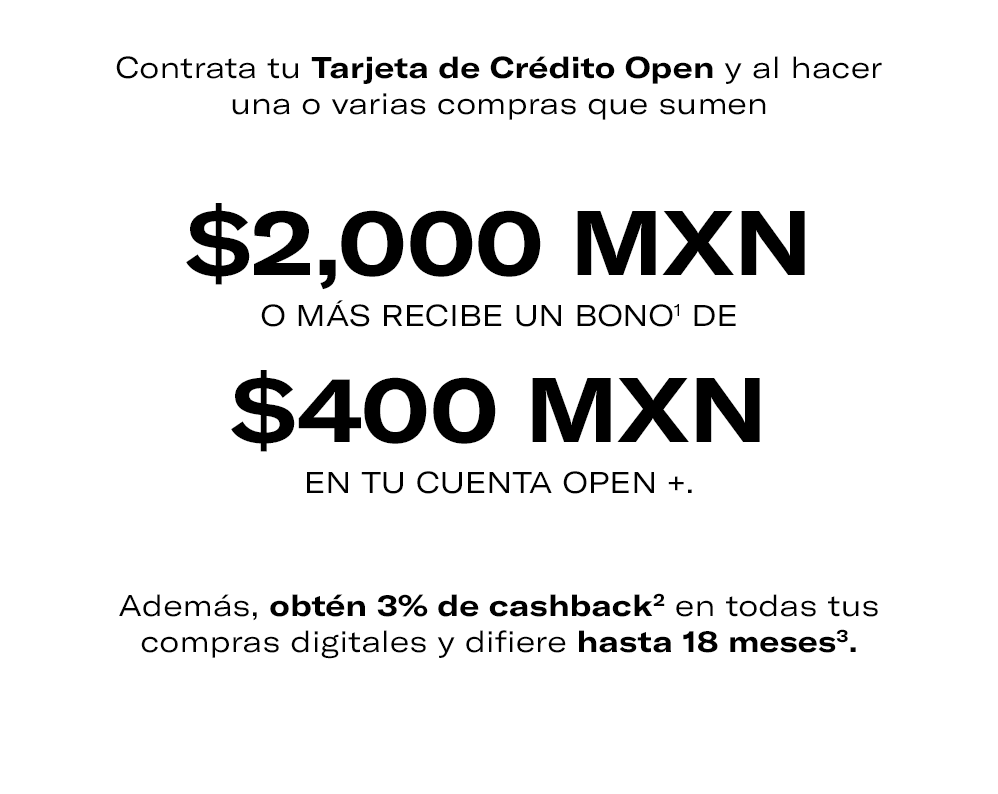
<style>
.page{position:relative;width:998px;height:794px;background:#ffffff}
.page>*{position:absolute;margin:0}
.t1{font:29.6px "GTAmerica-ExtendedRegular";letter-spacing:0.01em;color:#000000}
.t2{font:29.6px "GTAmerica-ExtendedBold";letter-spacing:0.01em;color:#000000}
.t3{font:29.6px/51px "GTAmerica-ExtendedRegular";letter-spacing:0.01em;color:#000000}
.t4{font:90px "GTAmerica-ExtendedBold";letter-spacing:-0.01em;color:#000000}
</style>
<div class="page">
<p class="t1" style="left:116px;top:56px;width:766px;height:64px;text-align:center">Contrata tu <span class="t2">Tarjeta de Crédito Open</span> y al hacer<br>una o varias compras que sumen</p>
<p class="t3" style="left:186px;top:203px;width:619px;height:124px;text-align:center"><span class="t4">$2,000 MXN<br></span>O MÁS RECIBE UN BONO1 DE</p>
<p class="t3" style="left:231px;top:370px;width:529px;height:124px;text-align:center"><span class="t4">$400 MXN<br></span>EN TU CUENTA OPEN +.</p>
<p class="t1" style="left:119px;top:593px;width:759px;height:66px;text-align:center">Además, <span class="t2">obtén 3% de cashback2</span> en todas tus<br>compras digitales y difiere <span class="t2">hasta 18 meses3.</span></p>
</div>
